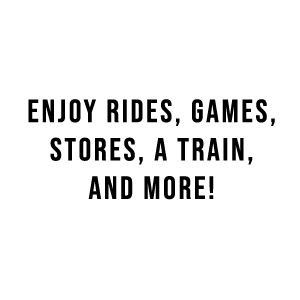
<style>
.page{position:relative;width:300px;height:300px;background:#ffffff}
.page>*{position:absolute;margin:0}
.t1{font:32px "BebasNeue-Regular";letter-spacing:0.08em;color:#000000}
</style>
<div class="page">
<p class="t1" style="left:28px;top:99px;width:247px;height:101px;text-align:center">ENJOY RIDEs, GAMES, STORES, A TRAIN,<br>AND MORE!</p>
</div>
